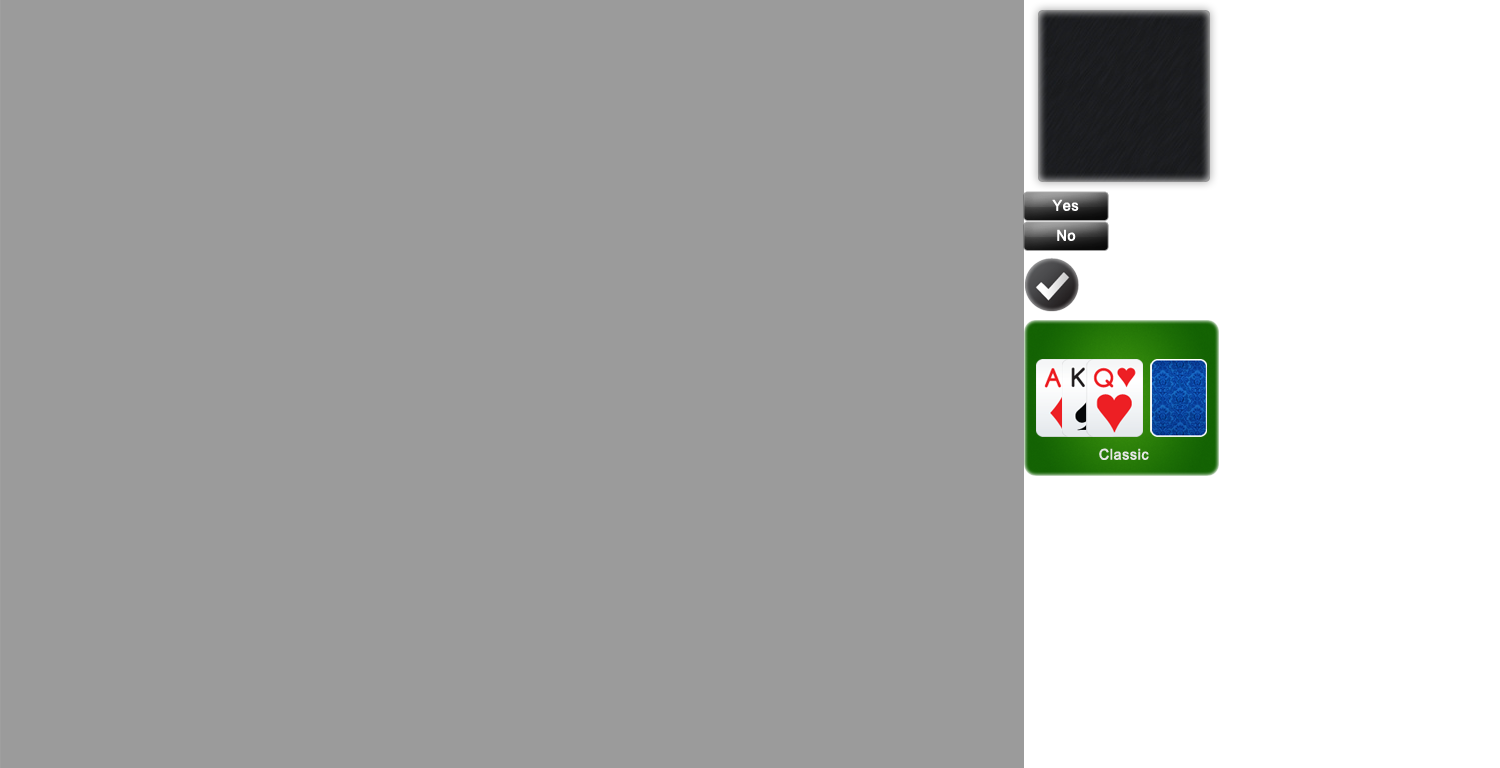
<style>
.page{position:relative;width:1500px;height:768px;background:#9b9b9b}
.page>*{position:absolute;margin:0}
.t1{font:14.8px "ArialMT";letter-spacing:0.025em;color:#ffffff;font-weight:bold;scale:0.95 1}
.t2{font:14.8px "ArialMT";letter-spacing:0.025em;color:#ffffff;font-weight:bold;scale:0.96 1}
.t3{font:14.7px "ArialMT";letter-spacing:0.025em;color:#e6e6e6;font-weight:bold;scale:0.95 1}
</style>
<div class="page">
<p class="t1" style="left:1052px;top:199px;width:27px;height:12px">Yes</p>
<p class="t2" style="left:1057px;top:229px;width:19px;height:12px">No</p>
<p class="t3" style="left:1099px;top:448px;width:50px;height:12px">Classic</p>
</div>
